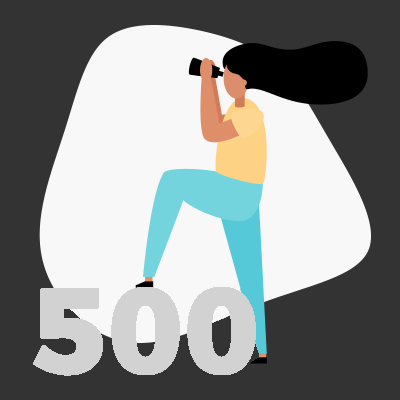
<style>
.page{position:relative;width:400px;height:400px;background:#333333}
.page>*{position:absolute;margin:0}
.t1{font:117.9px "Montserrat-Bold";color:#d2d2d2;font-weight:bold}
</style>
<div class="page">
<p class="t1" style="left:33px;top:287px;width:223px;height:89px">500</p>
</div>
